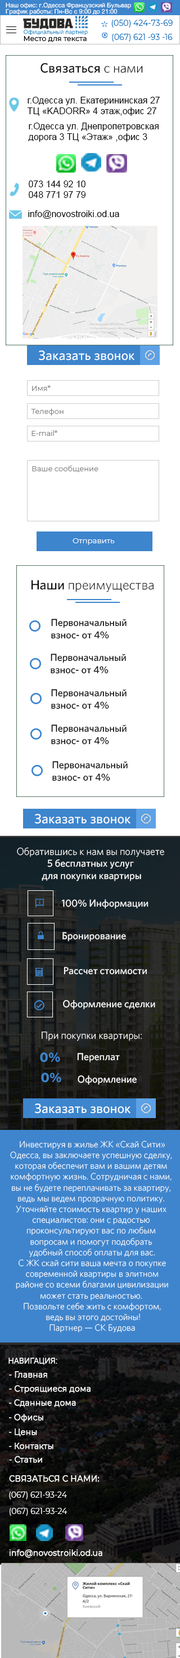
<style>
.page{position:relative;width:180px;height:1658px;background:#ffffff}
.page>*{position:absolute;margin:0}
.t1{font:6.2px "HelveticaNeueCyr-Roman";color:#ffffff}
.t2{font:7.9px "Montserrat-Regular";color:#006cba}
.t3{font:7px "Montserrat-Medium";color:#000000}
.t4{font:13.5px "Whitney-Medium";color:#070707}
.t5{font:13.5px "Whitney-Light";color:#070707}
.t6{font:9px "ArialMT";color:#000000}
.t7{font:13.5px "Whitney-Medium";color:#ffffff}
.t8{font:7.3px "Montserrat-Regular";color:#7e7e7e}
.t9{font:7.5px "Montserrat-Regular";color:#ffffff}
.t10{font:10.1px "Whitney-Medium";color:#070707}
.t11{font:10.1px "Whitney-Medium";color:#ffffff}
.t12{font:10.1px "Whitney-Light";color:#ffffff}
.t13{font:13.5px "Whitney-Bold";color:#3d85cd}
.t14{font:9px "Whitney-Light";color:#ffffff}
.t15{font:7.9px "Roboto-Light";color:#ffffff;font-weight:bold}
.t16{font:7.9px "Montserrat-Regular";color:#ffffff;font-weight:bold}
.t17{font:7.9px "Montserrat-Regular";color:#ffffff}
</style>
<div class="page">
<p class="t1" style="left:6px;top:2px;width:125px;height:7px">Наш офис: г.Одесса Французский Бульвар</p>
<p class="t1" style="left:6px;top:8px;width:112px;height:7px">График работы: Пн-Вс с 9:00 до 21:00</p>
<p class="t2" style="left:111px;top:20px;width:62px;height:8px">(050) 424-73-69</p>
<p class="t3" style="left:24px;top:36px;width:63px;height:6px">Место для текста</p>
<p class="t2" style="left:112px;top:34px;width:61px;height:8px">(067) 621 -93 -16</p>
<p class="t4" style="left:40px;top:63px;width:103px;height:10px">Связаться <span class="t5">с нами</span></p>
<p class="t6" style="left:27px;top:97px;width:133px;height:19px">г.Одесса ул. Екатерининская 27<br>ТЦ «KADORR» 4 этаж,офис 27</p>
<p class="t6" style="left:28px;top:123px;width:131px;height:19px">г.Одесса ул. Днепропетровская <br>дорога 3 ТЦ «Этаж» ,офис 3</p>
<p class="t6" style="left:29px;top:181px;width:57px;height:17px">073 144 92 10<br>048 771 97 79</p>
<p class="t6" style="left:28px;top:210px;width:91px;height:9px">info@novostroiki.od.ua</p>
<p class="t7" style="left:39px;top:350px;width:95px;height:11px">Заказать звонок</p>
<p class="t8" style="left:32px;top:385px;width:19px;height:6px">Имя*</p>
<p class="t8" style="left:31px;top:408px;width:33px;height:8px">Телефон</p>
<p class="t8" style="left:32px;top:430px;width:25px;height:6px">E-mail*</p>
<p class="t8" style="left:32px;top:465px;width:66px;height:7px">Ваше сообщение</p>
<p class="t9" style="left:73px;top:538px;width:42px;height:7px">Отправить</p>
<p class="t5" style="left:32px;top:580px;width:122px;height:12px"><span class="t4">Наши </span>преимущества</p>
<p class="t10" style="left:51px;top:619px;width:76px;height:20px">Первоначальный<br>взнос- от 4%</p>
<p class="t10" style="left:51px;top:654px;width:75px;height:20px">Первоначальный<br>взнос- от 4%</p>
<p class="t10" style="left:51px;top:689px;width:76px;height:20px">Первоначальный<br>взнос- от 4%</p>
<p class="t10" style="left:51px;top:724px;width:76px;height:21px">Первоначальный<br>взнос- от 4%</p>
<p class="t10" style="left:52px;top:761px;width:76px;height:20px">Первоначальный<br>взнос- от 4%</p>
<p class="t7" style="left:35px;top:814px;width:95px;height:10px">Заказать звонок</p>
<p class="t11" style="left:17px;top:848px;width:147px;height:33px;text-align:center"><span class="t12">Обратившись к нам вы получаете<br></span>5 бесплатных услуг<br> для покупки квартиры</p>
<p class="t11" style="left:61px;top:899px;width:87px;height:10px">100% Информации</p>
<p class="t11" style="left:62px;top:932px;width:64px;height:10px">Бронирование</p>
<p class="t11" style="left:64px;top:967px;width:83px;height:8px">Рассчет стоимости</p>
<p class="t11" style="left:63px;top:1000px;width:92px;height:10px">Оформление сделки</p>
<p class="t12" style="left:42px;top:1032px;width:100px;height:9px">При покупки квартиры:</p>
<p class="t13" style="left:40px;top:1052px;width:20px;height:11px">0%</p>
<p class="t11" style="left:77px;top:1053px;width:43px;height:10px">Переплат</p>
<p class="t13" style="left:41px;top:1073px;width:20px;height:10px">0%</p>
<p class="t11" style="left:78px;top:1076px;width:59px;height:9px">Оформление</p>
<p class="t7" style="left:35px;top:1104px;width:95px;height:10px">Заказать звонок</p>
<p class="t14" style="left:10px;top:1141px;width:162px;height:192px;text-align:center">Инвестируя в жилье ЖК «Скай Сити» <br>Одесса, вы заключаете успешную сделку, <br>которая обеспечит вам и вашим детям <br>комфортную жизнь. Сотрудничая с нами, <br>вы не будете переплачивать за квартиру, <br>ведь мы ведем прозрачную политику. <br>Уточняйте стоимость квартир у наших <br>специалистов: они с радостью <br>проконсультируют вас по любым <br>вопросам и помогут подобрать <br>удобный способ оплаты для вас.<br> С ЖК скай сити ваша мечта о покупке <br>современной квартиры в элитном<br> районе со всеми благами цивилизации <br>может стать реальностью. <br>Позвольте себе жить с комфортом,<br> ведь вы этого достойны!<br>Партнер — СК Будова</p>
<p class="t15" style="left:8px;top:1358px;width:49px;height:7px">НАВИГАЦИЯ:</p>
<p class="t16" style="left:9px;top:1371px;width:38px;height:7px">- Главная</p>
<p class="t16" style="left:9px;top:1385px;width:82px;height:9px">- Строящиеся дома</p>
<p class="t16" style="left:9px;top:1400px;width:67px;height:7px">- Сданные дома</p>
<p class="t16" style="left:9px;top:1414px;width:34px;height:9px">- Офисы</p>
<p class="t16" style="left:9px;top:1429px;width:28px;height:8px">- Цены</p>
<p class="t16" style="left:9px;top:1443px;width:44px;height:7px">- Контакты</p>
<p class="t16" style="left:9px;top:1456px;width:33px;height:7px">- Статьи</p>
<p class="t16" style="left:9px;top:1475px;width:90px;height:7px">СВЯЗАТЬСЯ С НАМИ:</p>
<p class="t17" style="left:9px;top:1492px;width:58px;height:8px">(067) 621-93-24</p>
<p class="t17" style="left:10px;top:1508px;width:58px;height:8px">(067) 621-93-24</p>
<p class="t16" style="left:9px;top:1550px;width:93px;height:8px">info@novostroiki.od.ua</p>
</div>
